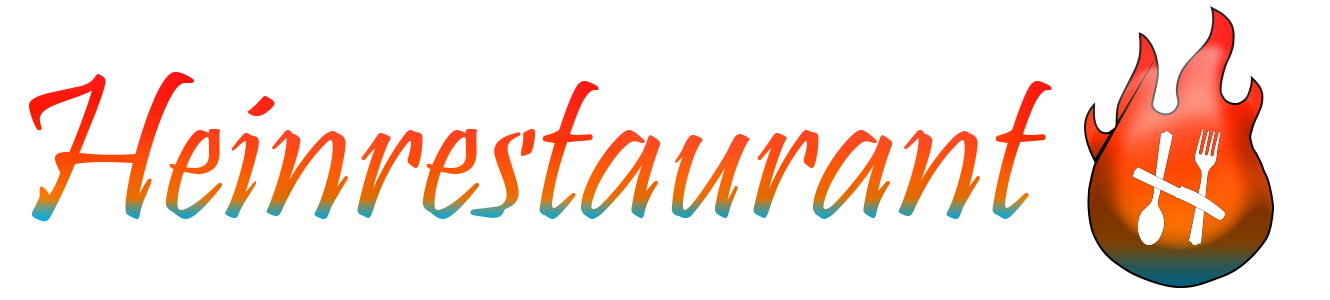
<style>
.page{position:relative;width:1330px;height:300px;background:#ffffff}
.page>*{position:absolute;margin:0}
.t1{font:211.2px "Pristina-Regular"}
</style>
<div class="page">
<p class="t1" style="left:29px;top:72px;width:1023px;height:150px">Heinrestaurant</p>
</div>
